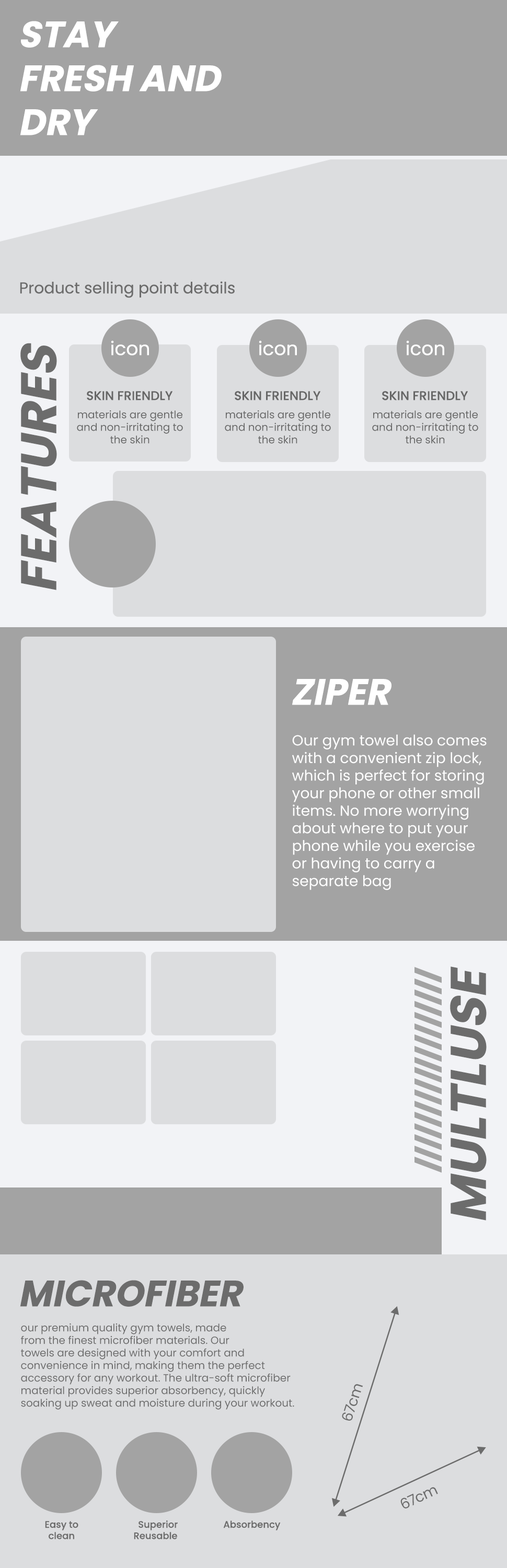
<style>
.page{position:relative;width:507px;height:1568px;background:#dcdddf}
.page>*{position:absolute;margin:0}
.t1{font:36.6px "Poppins-Bold";color:#ffffff;text-transform:uppercase;font-style:italic}
.t2{font:15.7px "Poppins-Regular";color:#6c6c6c}
.t3{font:18.8px "Poppins-Regular";color:#ffffff}
.t4{font:50.2px "Poppins-Bold";color:#6c6c6c;text-transform:uppercase;font-style:italic}
.t5{font:12.5px "Poppins-Medium";color:#666666;text-transform:uppercase}
.t6{font:10.5px "Poppins-Regular";color:#666666}
.t7{font:14.6px "Poppins-Regular";color:#ffffff}
.t8{font:36.6px "Poppins-Bold";color:#6c6c6c;text-transform:uppercase;font-style:italic}
.t9{font:10.5px "Poppins-Regular";color:#6c6c6c}
.t10{font:14.6px "Poppins-Regular";color:#6c6c6c}
.t11{font:9.4px "Poppins-Medium";color:#6c6c6c}
</style>
<div class="page">
<p class="t1" style="left:20px;top:21px;width:202px;height:114px">STAY<br>FRESH AND<br>DRY</p>
<p class="t2" style="left:20px;top:281px;width:215px;height:17px">Product selling point details</p>
<p class="t3" style="left:111px;top:340px;width:38px;height:15px">icon</p>
<p class="t3" style="left:259px;top:340px;width:38px;height:15px">icon</p>
<p class="t3" style="left:406px;top:340px;width:38px;height:15px">icon</p>
<p class="t4" style="left:20px;top:343px;width:37px;height:247px;rotate:180deg">Features</p>
<p class="t5" style="left:87px;top:391px;width:86px;height:9px">Skin Friendly</p>
<p class="t5" style="left:235px;top:391px;width:86px;height:9px">Skin Friendly</p>
<p class="t5" style="left:382px;top:391px;width:86px;height:9px">Skin Friendly</p>
<p class="t6" style="left:77px;top:410px;width:106px;height:34px;text-align:center">materials are gentle<br>and non-irritating to<br>the skin</p>
<p class="t6" style="left:225px;top:410px;width:106px;height:34px;text-align:center">materials are gentle<br>and non-irritating to<br>the skin</p>
<p class="t6" style="left:372px;top:410px;width:106px;height:34px;text-align:center">materials are gentle<br>and non-irritating to<br>the skin</p>
<p class="t1" style="left:292px;top:679px;width:99px;height:26px">ZIPER</p>
<p class="t7" style="left:292px;top:734px;width:195px;height:156px">Our gym towel also comes<br>with a convenient zip lock, <br>which is perfect for storing <br>your phone or other small <br>items. No more worrying <br>about where to put your <br>phone while you exercise <br>or having to carry a <br>separate bag</p>
<p class="t4" style="left:450px;top:966px;width:37px;height:254px;rotate:180deg">MULtluse</p>
<p class="t8" style="left:20px;top:1280px;width:224px;height:27px">MICROFIBER</p>
<p class="t9" style="left:21px;top:1323px;width:273px;height:87px">our premium quality gym towels, made<br>from the finest microfiber materials. Our <br>towels are designed with your comfort and<br>convenience in mind, making them the perfect <br>accessory for any workout. The ultra-soft microfiber<br>material provides superior absorbency, quickly<br>soaking up sweat and moisture during your workout.</p>
<p class="t10" style="left:342px;top:1384px;width:21px;height:37px;rotate:-72deg">67cm</p>
<p class="t10" style="left:400px;top:1487px;width:38px;height:21px;rotate:-25deg">67cm</p>
<p class="t11" style="left:45px;top:1521px;width:33px;height:18px;text-align:center">Easy to<br>clean</p>
<p class="t11" style="left:134px;top:1520px;width:44px;height:19px;text-align:center">Superior<br>Reusable</p>
<p class="t11" style="left:223px;top:1520px;width:58px;height:10px">Absorbency</p>
</div>
